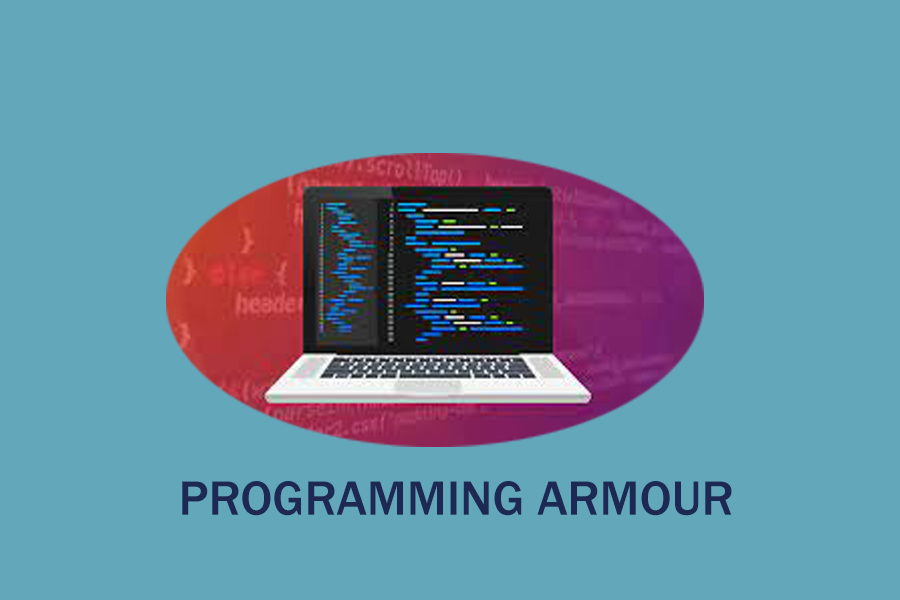
<style>
.page{position:relative;width:900px;height:600px;background:#63a7bb}
.page>*{position:absolute;margin:0}
.t1{font:50px "FranklinGothic-Medium";color:#1d2953}
</style>
<div class="page">
<p class="t1" style="left:182px;top:481px;width:550px;height:35px">PROGRAMMING ARMOUR</p>
</div>
